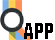
<style>
.page{position:relative;width:55px;height:40px;background:#ffffff}
.page>*{position:absolute;margin:0}
.t1{font:20px "Impact";color:#000000}
</style>
<div class="page">
<p class="t1" style="left:24px;top:23px;width:29px;height:16px">APP</p>
</div>
